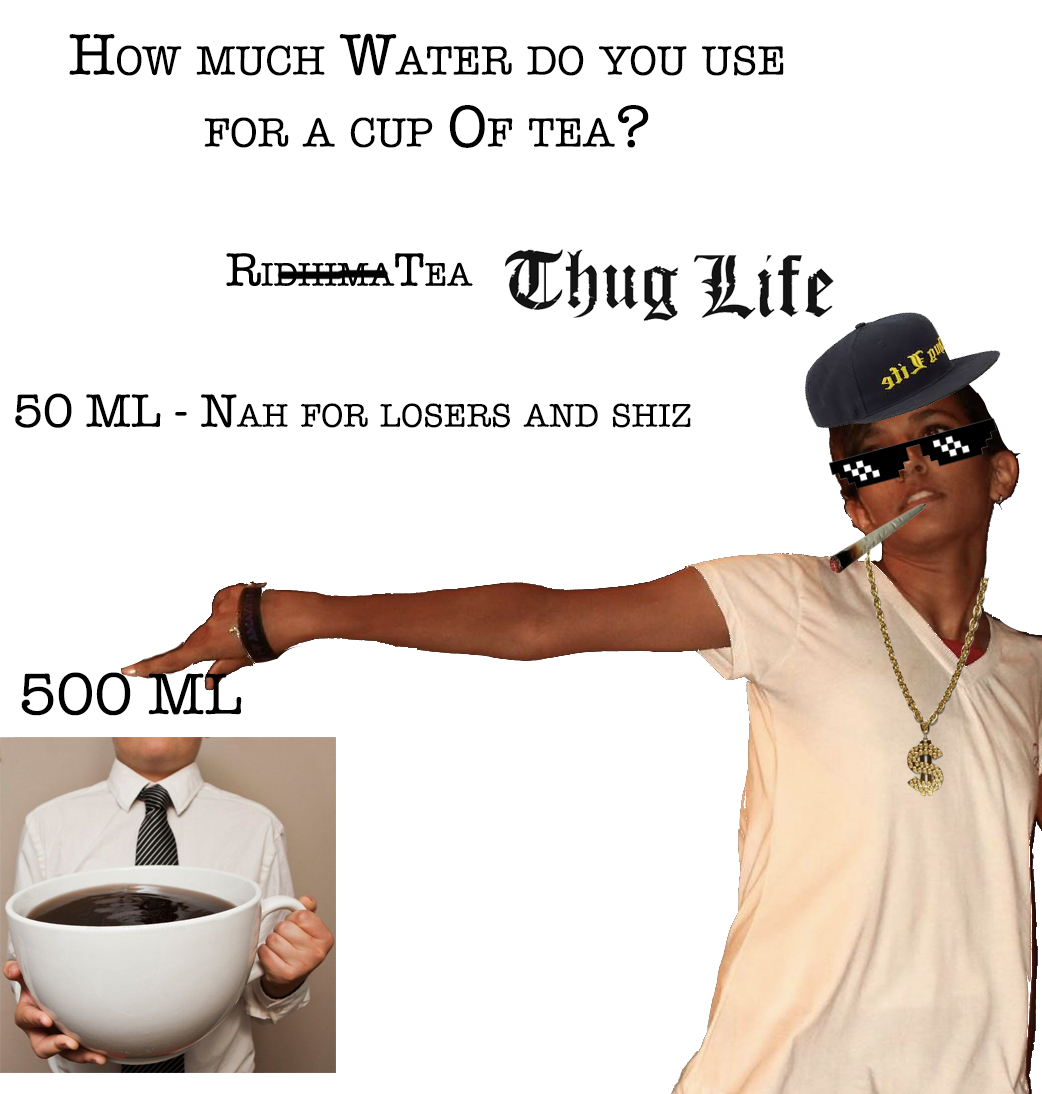
<style>
.page{position:relative;width:1042px;height:1094px;background:#ffffff}
.page>*{position:absolute;margin:0}
.t1{font:60px "AmericanTypewriter";color:#000000;font-variant:small-caps}
.t2{font:48px "AmericanTypewriter";color:#000000;font-variant:small-caps}
</style>
<div class="page">
<p class="t1" style="left:69px;top:33px;width:715px;height:115px;text-align:center">How much Water do you use for a cup Of tea?</p>
<p class="t2" style="left:15px;top:393px;width:676px;height:35px">50 ML - Nah for losers and shiz</p>
<p class="t1" style="left:21px;top:672px;width:221px;height:44px">500 ML</p>
</div>
